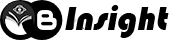
<style>
.page{position:relative;width:175px;height:40px;background:#ffffff}
.page>*{position:absolute;margin:0}
.t1{font:34.7px "Bauhaus93";color:#000000;font-style:italic}
</style>
<div class="page">
<p class="t1" style="left:65px;top:5px;width:104px;height:33px">Insight</p>
</div>
